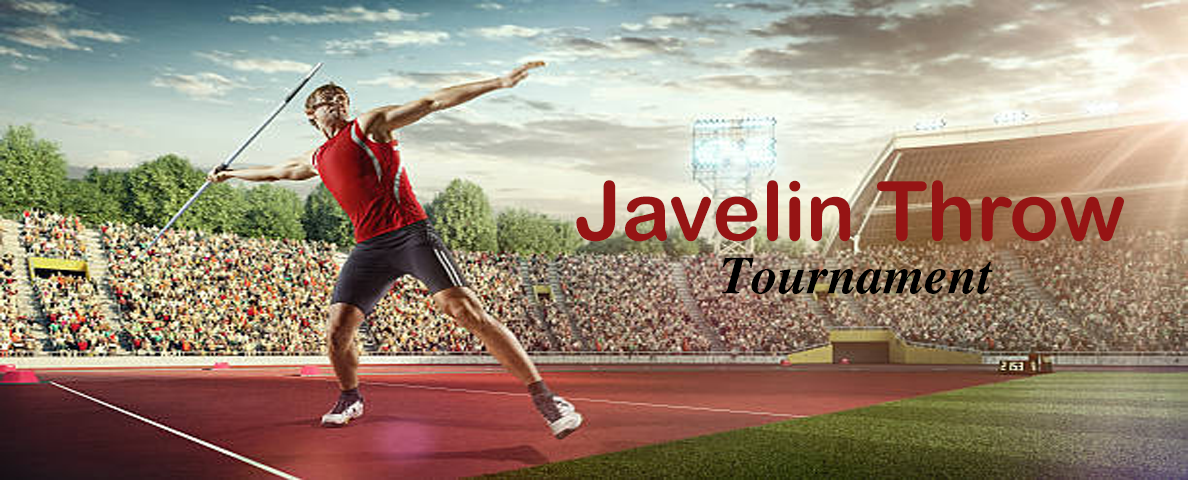
<style>
.page{position:relative;width:1188px;height:480px}
.page>*{position:absolute;margin:0}
.t1{font:82.3px "ArialRoundedMTBold";color:#961414}
.t2{font:52.8px "Times-BoldItalic";color:#000000}
</style>
<div class="page">
<p class="t1" style="left:576px;top:180px;width:548px;height:62px">Javelin Throw</p>
<p class="t2" style="left:722px;top:257px;width:271px;height:37px">Tournament</p>
</div>
